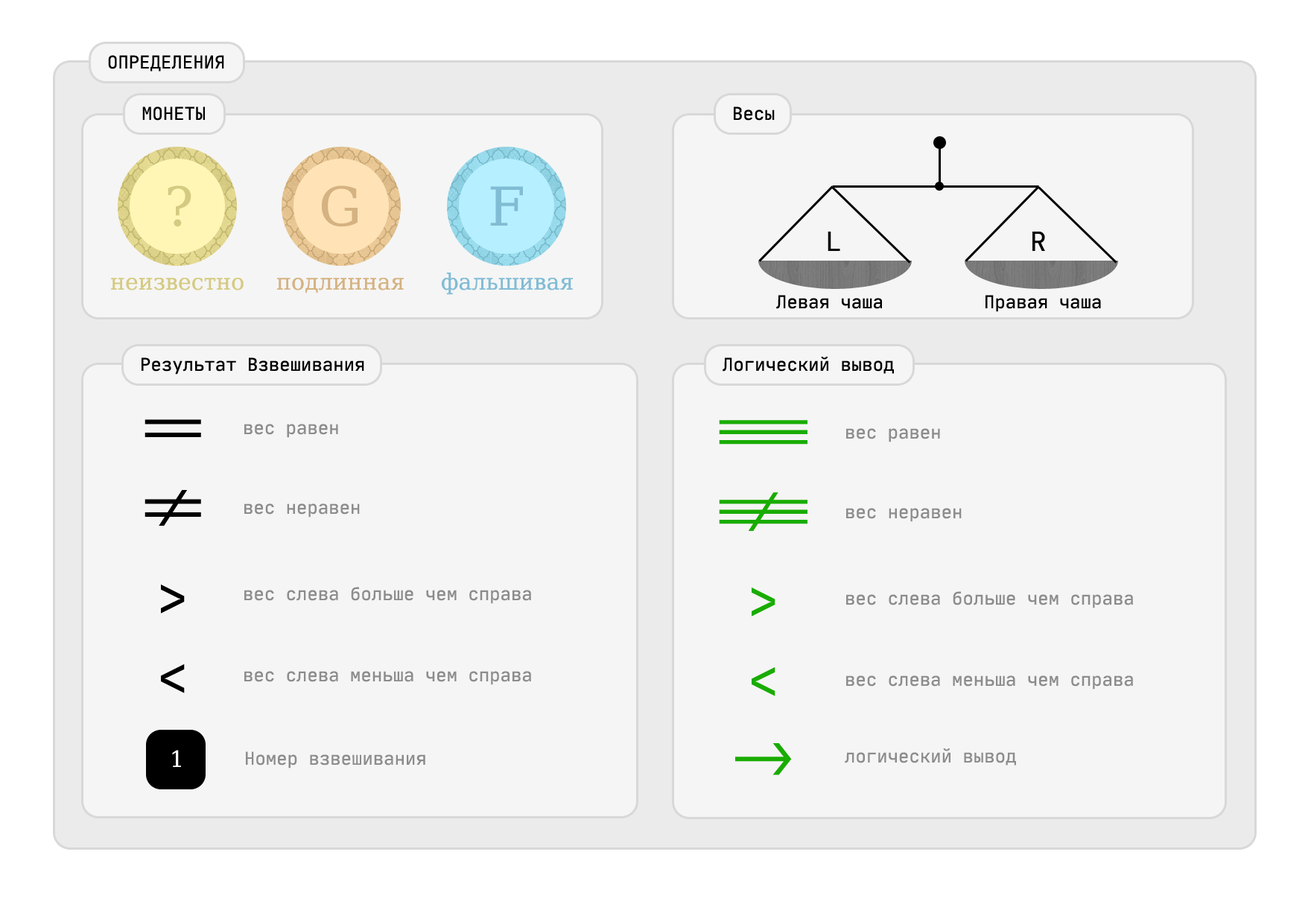
<style>
.page{position:relative;width:1314px;height:907px;background:#f5f5f5}
.page>*{position:absolute;margin:0}
.t1{font:17.9px "JetBrainsMono-Regular";color:#000000}
.t2{font:53.6px "DejaVuSerif";color:#d5ca81}
.t3{font:53.6px "DejaVuSerif";color:#d5b281}
.t4{font:53.6px "DejaVuSerif";color:#81bcd5}
.t5{font:26.8px "JetBrainsMono-Regular";color:#000000}
.t6{font:22.3px "DejaVuSerif";color:#d5ca81}
.t7{font:22.3px "DejaVuSerif";color:#d5b281}
.t8{font:22.3px "DejaVuSerif";color:#81bcd5}
.t9{font:53.6px "JetBrainsMono-Regular";color:#000000}
.t10{font:17.9px "JetBrainsMono-Regular";color:#8c8c8c}
.t11{font:53.6px "JetBrainsMono-Regular";color:#19ac01}
.t12{font:22.3px "DejaVuSerif";color:#ffffff}
</style>
<div class="page">
<p class="t1" style="left:108px;top:55px;width:116px;height:17px">ОПРЕДЕЛЕНИЯ</p>
<p class="t1" style="left:142px;top:107px;width:63px;height:14px">МОНЕТЫ</p>
<p class="t1" style="left:734px;top:107px;width:41px;height:14px">Весы</p>
<p class="t2" style="left:168px;top:185px;width:23px;height:42px">?</p>
<p class="t3" style="left:322px;top:185px;width:36px;height:42px">G</p>
<p class="t4" style="left:490px;top:186px;width:33px;height:40px">F</p>
<p class="t5" style="left:828px;top:232px;width:12px;height:19px">L</p>
<p class="t5" style="left:1033px;top:232px;width:12px;height:19px">R</p>
<p class="t6" style="left:111px;top:278px;width:133px;height:13px">неизвестно</p>
<p class="t7" style="left:277px;top:278px;width:127px;height:16px">подлинная</p>
<p class="t8" style="left:442px;top:273px;width:131px;height:22px">фальшивая</p>
<p class="t1" style="left:776px;top:295px;width:106px;height:14px">Левая чаша</p>
<p class="t1" style="left:986px;top:295px;width:115px;height:17px">Правая чаша</p>
<p class="t1" style="left:142px;top:358px;width:222px;height:17px">Результат Взвешивания</p>
<p class="t1" style="left:723px;top:357px;width:171px;height:17px">Логический вывод</p>
<p class="t9" style="left:145px;top:419px;width:56px;height:18px">==</p>
<p class="t10" style="left:244px;top:424px;width:94px;height:14px">вес равен</p>
<p class="t11" style="left:719px;top:420px;width:89px;height:25px">===</p>
<p class="t10" style="left:846px;top:428px;width:94px;height:15px">вес равен</p>
<p class="t9" style="left:145px;top:490px;width:56px;height:36px">!=</p>
<p class="t11" style="left:719px;top:492px;width:89px;height:39px">!==</p>
<p class="t10" style="left:244px;top:504px;width:116px;height:14px">вес неравен</p>
<p class="t10" style="left:846px;top:508px;width:116px;height:14px">вес неравен</p>
<p class="t9" style="left:161px;top:585px;width:24px;height:29px">&gt;</p>
<p class="t10" style="left:244px;top:587px;width:287px;height:17px">вес слева больше чем справа</p>
<p class="t11" style="left:752px;top:588px;width:24px;height:29px">&gt;</p>
<p class="t10" style="left:846px;top:592px;width:287px;height:17px">вес слева больше чем справа</p>
<p class="t9" style="left:161px;top:665px;width:24px;height:29px">&lt;</p>
<p class="t10" style="left:244px;top:671px;width:287px;height:14px">вес слева меньша чем справа</p>
<p class="t11" style="left:752px;top:668px;width:24px;height:29px">&lt;</p>
<p class="t10" style="left:846px;top:676px;width:287px;height:14px">вес слева меньша чем справа</p>
<p class="t11" style="left:735px;top:743px;width:57px;height:33px">-&gt;</p>
<p class="t10" style="left:845px;top:749px;width:171px;height:17px">логический вывод</p>
<p class="t12" style="left:172px;top:750px;width:9px;height:17px">1</p>
<p class="t10" style="left:246px;top:752px;width:179px;height:17px">Номер взвешивания</p>
</div>
